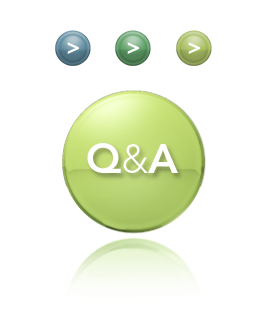
<style>
.page{position:relative;width:264px;height:333px;background:#ffffff}
.page>*{position:absolute;margin:0}
.t1{font:22.3px "Avenir-Heavy";letter-spacing:-0.06em;color:#ffffff}
.t2{font:41.5px "Avenir-Heavy";letter-spacing:-0.06em;color:#ffffff}
.t3{font:39.5px "Avenir-Light";letter-spacing:-0.06em;color:#ffffff}
</style>
<div class="page">
<p class="t1" style="left:67px;top:42px;width:12px;height:12px">&gt;</p>
<p class="t1" style="left:127px;top:42px;width:12px;height:12px">&gt;</p>
<p class="t1" style="left:188px;top:42px;width:12px;height:12px">&gt;</p>
<p class="t2" style="left:87px;top:143px;width:91px;height:30px">Q<span class="t3">&amp;</span>A</p>
</div>
